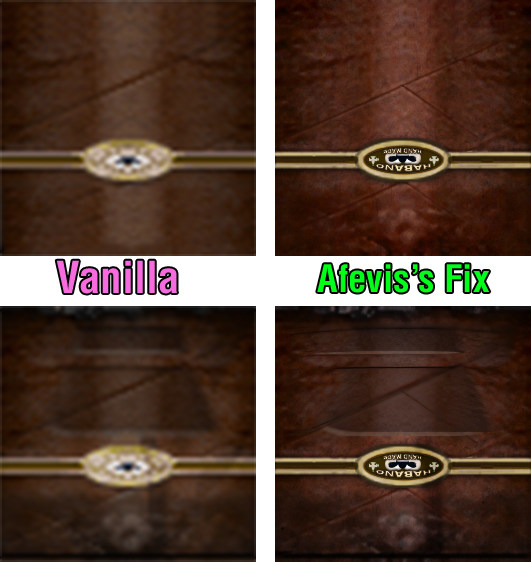
<style>
.page{position:relative;width:531px;height:562px}
.page>*{position:absolute;margin:0}
.t1{font:43px "Helvetica-Condensed-Bold";color:#f66bdd}
.t2{font:37.1px "Helvetica-Condensed-Bold";color:#00ff19}
</style>
<div class="page">
<p class="t1" style="left:56px;top:260px;width:121px;height:34px">Vanilla</p>
<p class="t2" style="left:317px;top:264px;width:173px;height:29px">Afevis’s Fix</p>
</div>
